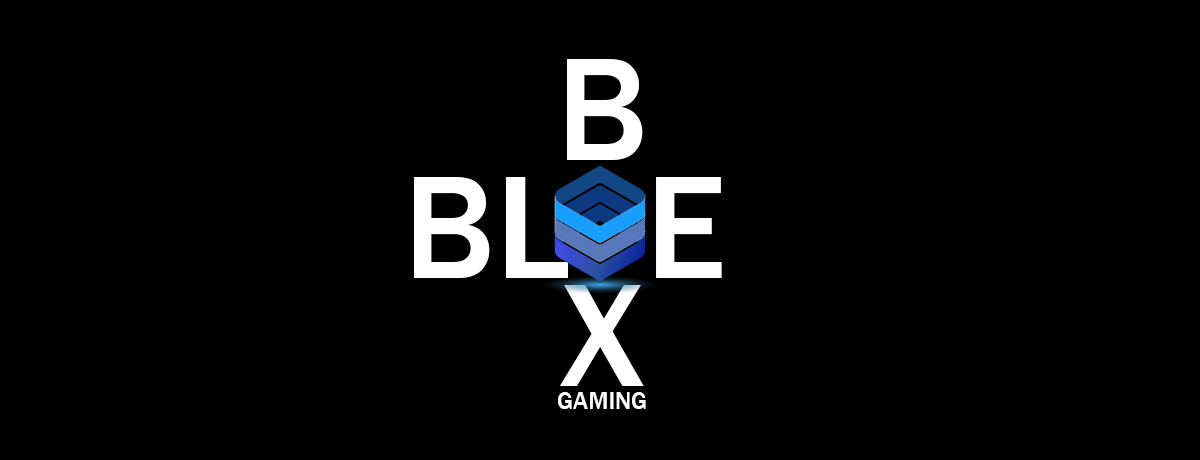
<style>
.page{position:relative;width:1200px;height:460px;background:#000000}
.page>*{position:absolute;margin:0}
.t1{font:151px "FranklinGothic-Medium";color:#ffffff}
.t2{font:25px "FranklinGothic-Medium";color:#ffffff}
</style>
<div class="page">
<p class="t1" style="left:560px;top:59px;width:84px;height:327px">B  X</p>
<p class="t1" style="left:414px;top:177px;width:308px;height:101px">BL  E</p>
<p class="t2" style="left:558px;top:392px;width:88px;height:17px">GAMING</p>
</div>
